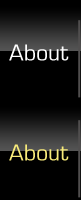
<style>
.page{position:relative;width:81px;height:200px;background:#000000}
.page>*{position:absolute;margin:0}
.t1{font:24px "EurostileRegular";color:#ffffff}
.t2{font:24px "EurostileRegular";color:#f8eb7a}
</style>
<div class="page">
<p class="t1" style="left:9px;top:44px;width:60px;height:17px">About</p>
<p class="t2" style="left:9px;top:144px;width:60px;height:17px">About</p>
</div>
